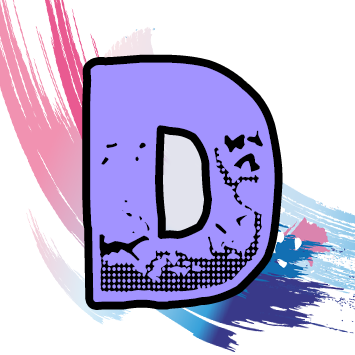
<style>
.page{position:relative;width:355px;height:355px;background:#ffffff}
.page>*{position:absolute;margin:0}
.t1{font:319.1px "NightFeverAgain";color:#a293ff;scale:0.85 1}
</style>
<div class="page">
<p class="t1" style="left:90px;top:62px;width:185px;height:240px">D</p>
</div>
